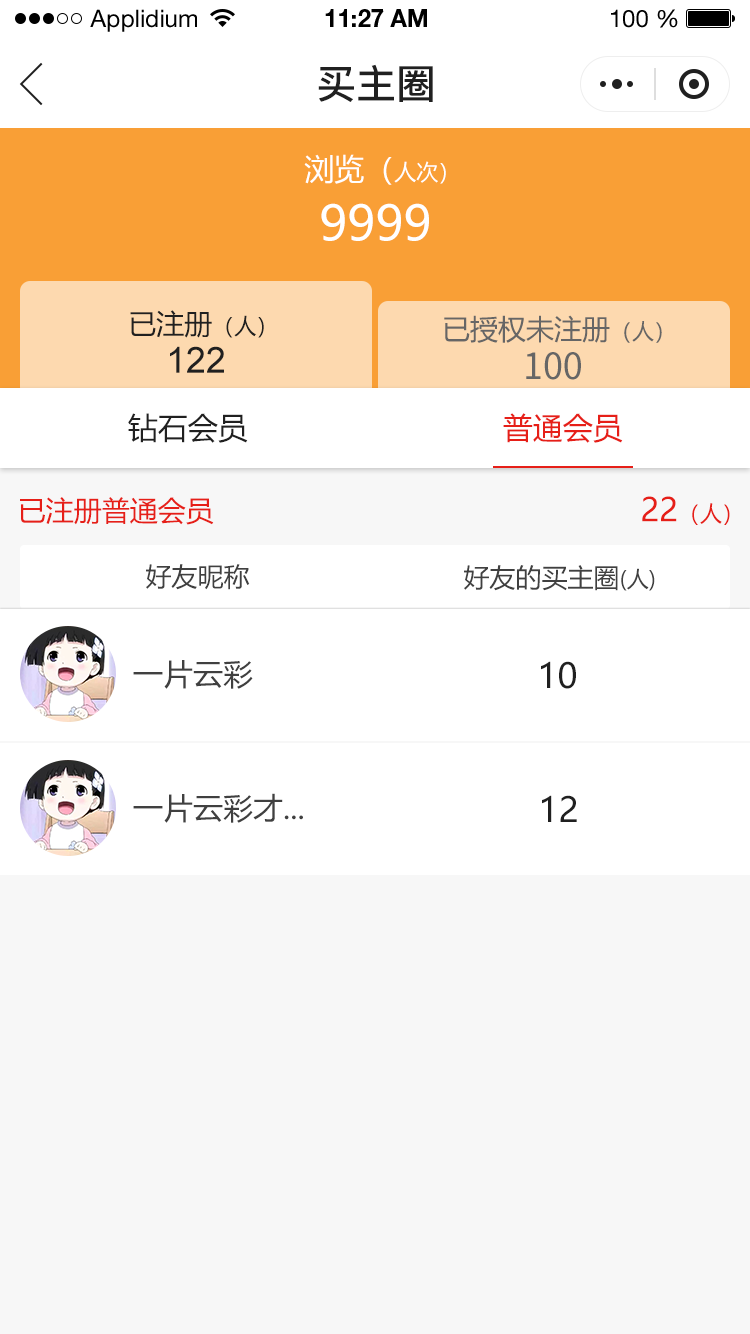
<style>
.page{position:relative;width:750px;height:1334px;background:#f7f7f7}
.page>*{position:absolute;margin:0}
.t1{font:24px "HelveticaNeueLTStd-Roman";color:#000000}
.t2{font:24px "HelveticaNeueLTStd-Bd";color:#000000}
.t3{font:40px "PingFang-SC-Bold";color:#202020;text-transform:uppercase}
.t4{font:30px "MicrosoftYaHei";color:#ffffff;text-transform:uppercase}
.t5{font:22px "MicrosoftYaHei";color:#ffffff;text-transform:uppercase}
.t6{font:48px "MicrosoftYaHei";color:#ffffff;text-transform:uppercase}
.t7{font:28px "MicrosoftYaHei";color:#202020;text-transform:uppercase}
.t8{font:22px "MicrosoftYaHei";color:#202020;text-transform:uppercase}
.t9{font:28.1px "MicrosoftYaHei";color:#666666;text-transform:uppercase}
.t10{font:22.1px "MicrosoftYaHei";color:#666666;text-transform:uppercase}
.t11{font:36px "ArialMT";color:#202020;text-transform:uppercase}
.t12{font:36.1px "SourceHanSansCN-Regular";color:#666666;text-transform:uppercase}
.t13{font:30px "MicrosoftYaHei";color:#202020;text-transform:uppercase}
.t14{font:30px "MicrosoftYaHei";color:#e61f18;text-transform:uppercase}
.t15{font:28px "MicrosoftYaHei";color:#e61f18;text-transform:uppercase}
.t16{font:22px "MicrosoftYaHei";color:#e61f18;text-transform:uppercase}
.t17{font:32px "MicrosoftYaHei";color:#e61f18;text-transform:uppercase}
.t18{font:26px "MicrosoftYaHei";color:#404040;text-transform:uppercase}
.t19{font:22px "MicrosoftYaHei";color:#404040;text-transform:uppercase}
.t20{font:30px "MicrosoftYaHei";color:#404040;text-transform:uppercase}
.t21{font:34px "MicrosoftYaHei";color:#202020;text-transform:uppercase}
</style>
<div class="page">
<p class="t1" style="left:90px;top:9px;width:107px;height:23px">Applidium</p>
<p class="t2" style="left:325px;top:9px;width:102px;height:18px">11:27 AM</p>
<p class="t1" style="left:611px;top:9px;width:67px;height:19px">100 %</p>
<p class="t3" style="left:318px;top:64px;width:115px;height:38px">买主圈</p>
<p class="t4" style="left:304px;top:154px;width:142px;height:31px">浏览（<span class="t5">人次）</span></p>
<p class="t6" style="left:321px;top:203px;width:108px;height:38px">9999</p>
<p class="t7" style="left:130px;top:310px;width:134px;height:28px">已注册<span class="t8">（人）</span></p>
<p class="t9" style="left:444px;top:315px;width:218px;height:28px">已授权未注册<span class="t10">（人）</span></p>
<p class="t11" style="left:170px;top:346px;width:54px;height:27px">122</p>
<p class="t12" style="left:526px;top:352px;width:55px;height:28px">100</p>
<p class="t13" style="left:128px;top:413px;width:120px;height:30px">钻石会员</p>
<p class="t14" style="left:503px;top:413px;width:120px;height:30px">普通会员</p>
<p class="t15" style="left:20px;top:497px;width:194px;height:28px">已注册普通会员</p>
<p class="t16" style="left:642px;top:496px;width:88px;height:29px"><span class="t17">22</span>（人）</p>
<p class="t18" style="left:146px;top:564px;width:104px;height:26px">好友昵称</p>
<p class="t18" style="left:464px;top:565px;width:191px;height:26px">好友的买主圈<span class="t19">(人)</span></p>
<p class="t20" style="left:133px;top:660px;width:120px;height:29px">一片云彩</p>
<p class="t21" style="left:541px;top:661px;width:35px;height:28px">10</p>
<p class="t20" style="left:133px;top:793px;width:170px;height:30px">一片云彩才...</p>
<p class="t21" style="left:542px;top:795px;width:35px;height:27px">12</p>
</div>
